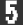
<style>
.page{position:relative;width:23px;height:25px;background:#333333}
.page>*{position:absolute;margin:0}
.t1{font:38.9px "VT323-Regular";color:#ffffff;font-weight:bold;scale:0.9 1}
</style>
<div class="page">
<p class="t1" style="left:5px;top:0px;width:13px;height:24px">5</p>
</div>
